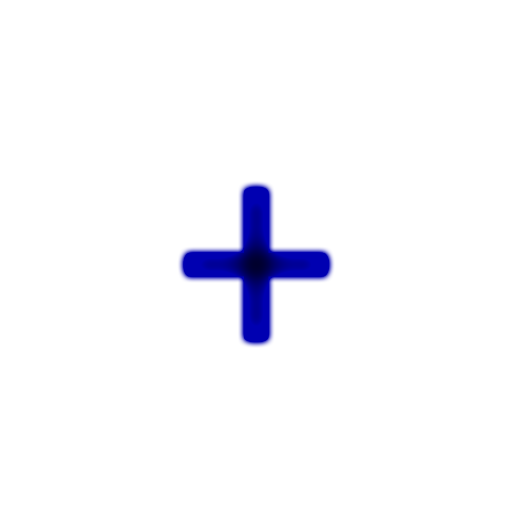
<style>
.page{position:relative;width:512px;height:512px;background:#ffffff}
.page>*{position:absolute;margin:0}
.t1{font:337px "Calibri"}
</style>
<div class="page">
<p class="t1" style="left:183px;top:187px;width:146px;height:155px">+</p>
</div>
